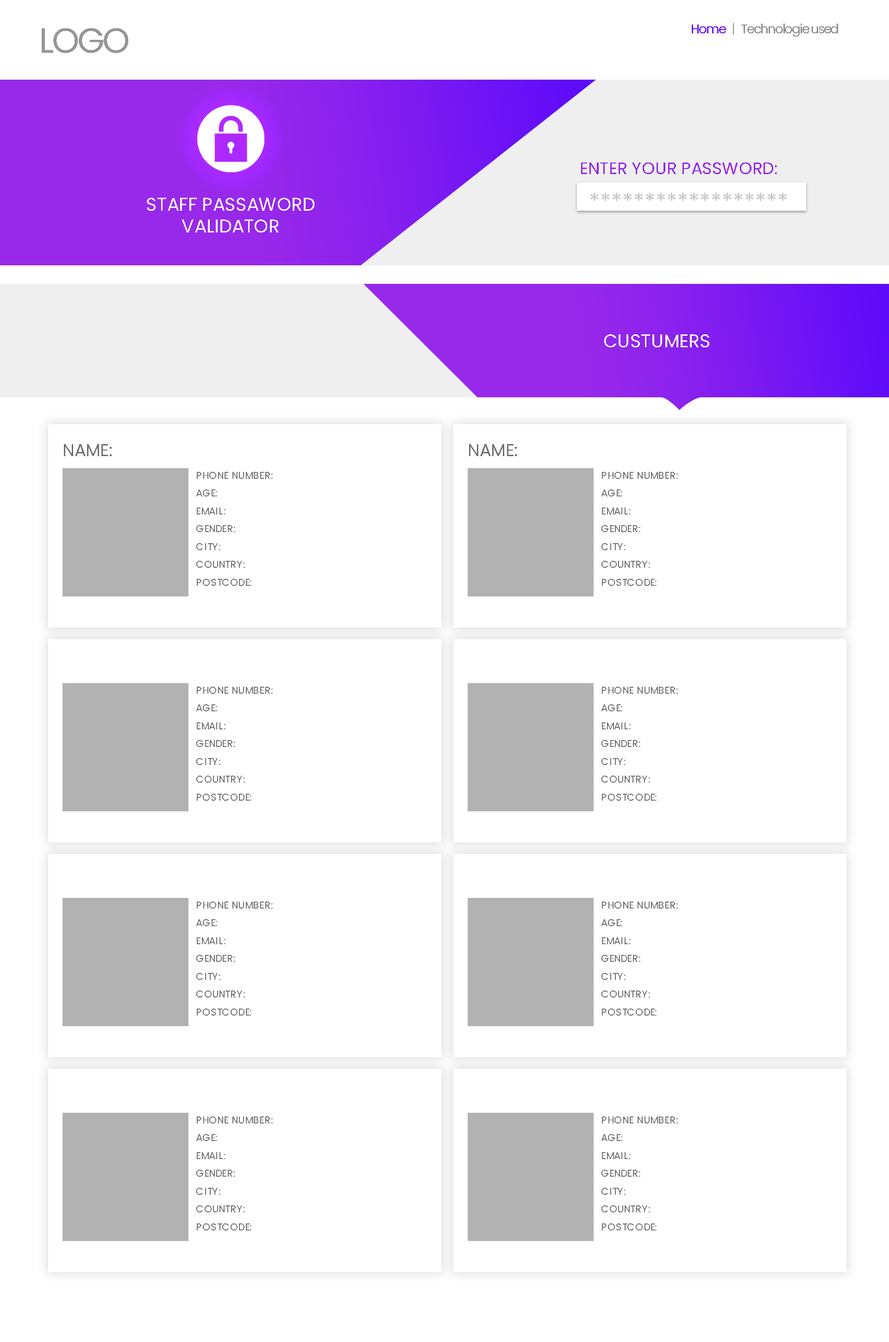
<style>
.page{position:relative;width:889px;height:1342px;background:#ffffff}
.page>*{position:absolute;margin:0}
.t1{font:35px "Poppins-Regular";letter-spacing:-0.08em;color:#969696}
.t2{font:12.8px "Poppins-Regular";letter-spacing:-0.08em;color:#8c8c8c}
.t3{font:12.8px "Poppins-Regular";letter-spacing:-0.08em;color:#670ff7}
.t4{font:16.7px "Poppins-Regular";color:#9426eb;text-transform:uppercase}
.t5{font:18.3px "Poppins-Regular";color:#fffefe;text-transform:uppercase}
.t6{font:22.1px "Poppins-Regular";color:#c7c7c7;text-transform:uppercase}
.t7{font:17.2px "Poppins-Regular";color:#6d6d6d;text-transform:uppercase}
.t8{font:9.9px/17.8px "Poppins-Regular";color:#6d6d6d;text-transform:uppercase}
</style>
<div class="page">
<p class="t1" style="left:42px;top:28px;width:86px;height:25px">LOGO</p>
<p class="t2" style="left:692px;top:23px;width:146px;height:14px"><span class="t3">Home   </span>|   Technologie used</p>
<p class="t4" style="left:581px;top:162px;width:196px;height:12px">Enter your password:</p>
<p class="t5" style="left:147px;top:198px;width:167px;height:34px;text-align:center">staff passaword <br>validator</p>
<p class="t6" style="left:590px;top:193px;width:197px;height:8px">******************</p>
<p class="t5" style="left:604px;top:334px;width:105px;height:13px">custumers</p>
<p class="t7" style="left:64px;top:444px;width:48px;height:12px">Name:</p>
<p class="t7" style="left:469px;top:444px;width:48px;height:12px">Name:</p>
<p class="t8" style="left:196px;top:472px;width:77px;height:114px">Phone Number:<br>age:<br>Email:<br>Gender:<br>City:<br>Country:<br>postcode:</p>
<p class="t8" style="left:601px;top:472px;width:77px;height:114px">Phone Number:<br>age:<br>Email:<br>Gender:<br>City:<br>Country:<br>postcode:</p>
<p class="t8" style="left:196px;top:687px;width:77px;height:113px">Phone Number:<br>age:<br>Email:<br>Gender:<br>City:<br>Country:<br>postcode:</p>
<p class="t8" style="left:601px;top:687px;width:77px;height:113px">Phone Number:<br>age:<br>Email:<br>Gender:<br>City:<br>Country:<br>postcode:</p>
<p class="t8" style="left:196px;top:901px;width:77px;height:114px">Phone Number:<br>age:<br>Email:<br>Gender:<br>City:<br>Country:<br>postcode:</p>
<p class="t8" style="left:601px;top:901px;width:77px;height:114px">Phone Number:<br>age:<br>Email:<br>Gender:<br>City:<br>Country:<br>postcode:</p>
<p class="t8" style="left:196px;top:1116px;width:77px;height:114px">Phone Number:<br>age:<br>Email:<br>Gender:<br>City:<br>Country:<br>postcode:</p>
<p class="t8" style="left:601px;top:1116px;width:77px;height:114px">Phone Number:<br>age:<br>Email:<br>Gender:<br>City:<br>Country:<br>postcode:</p>
</div>
